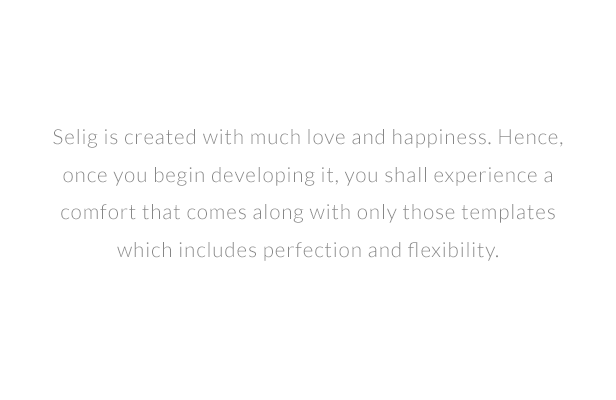
<style>
.page{position:relative;width:616px;height:400px;background:#ffffff}
.page>*{position:absolute;margin:0}
.t1{font:20.8px/37.5px "Lato-Light";letter-spacing:0.04em;color:#868686}
</style>
<div class="page">
<p class="t1" style="left:53px;top:129px;width:510px;height:132px;text-align:center">Selig is created with much love and happiness. Hence, once you begin developing it, you shall experience a comfort that comes along with only those templates which includes perfection and flexibility.</p>
</div>
